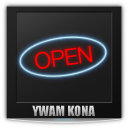
<style>
.page{position:relative;width:128px;height:128px}
.page>*{position:absolute;margin:0}
.t1{font:22.4px "HelveticaNeue-Light";color:#ff0000;text-transform:uppercase}
.t2{font:13px "Impact";letter-spacing:0.002em;text-transform:uppercase}
</style>
<div class="page">
<p class="t1" style="left:35px;top:46px;width:58px;height:23px;rotate:-7deg">OPEN</p>
<p class="t2" style="left:32px;top:105px;width:63px;height:12px">ywam Kona</p>
</div>
